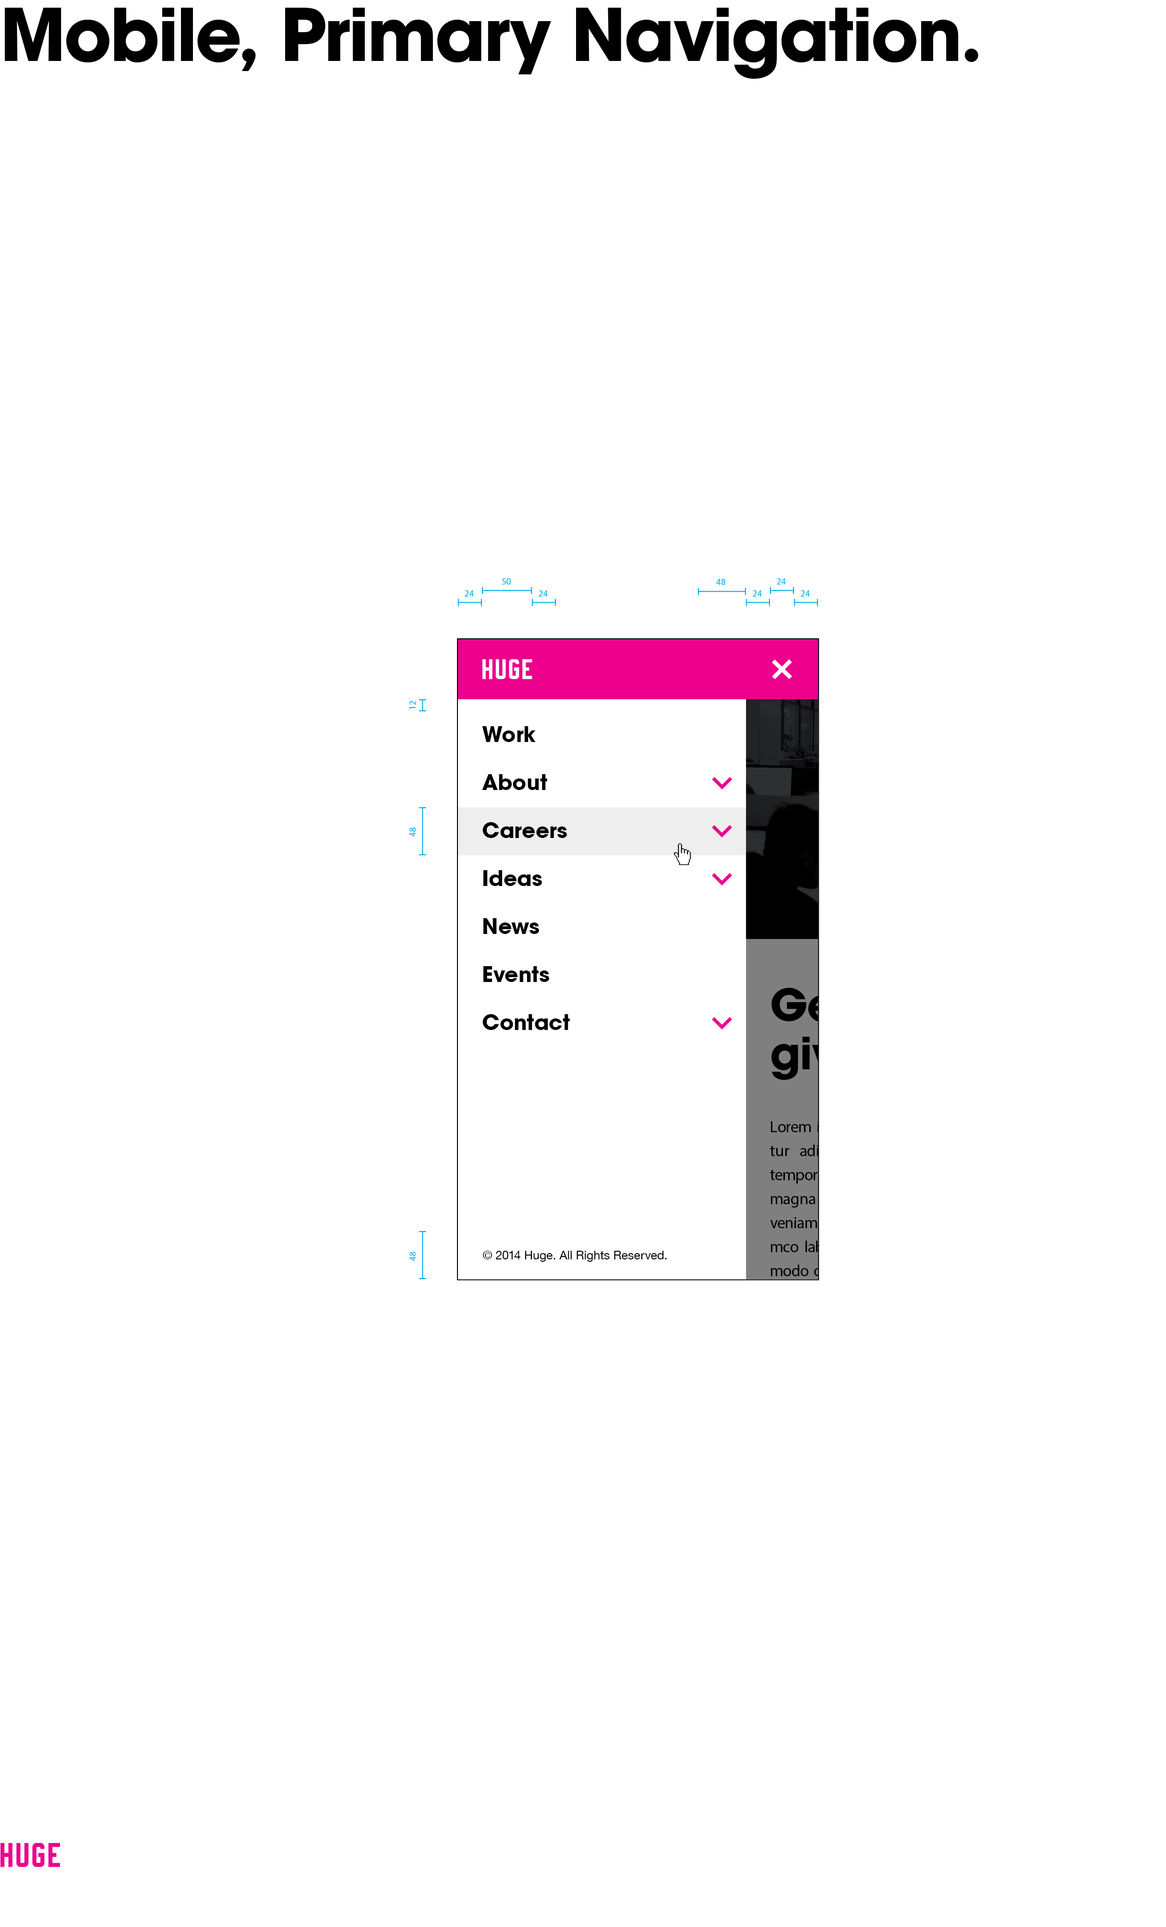
<style>
.page{position:relative;width:1166px;height:1927px;background:#ffffff}
.page>*{position:absolute;margin:0}
.t1{font:72px "HUGE-AvantGarde-Bold";letter-spacing:-0.026em;color:#000000}
.t2{font:72px "HUGE-AvantGarde-Bold";letter-spacing:-0.029em;color:#000000}
.t3{font:72px "HUGE-AvantGarde-Bold";letter-spacing:-0.059em;color:#000000}
.t4{font:72px "HUGE-AvantGarde-Bold";letter-spacing:-0.014em;color:#000000}
.t5{font:72px "HUGE-AvantGarde-Bold";letter-spacing:-0.033em;color:#000000}
.t6{font:72px "HUGE-AvantGarde-Bold";letter-spacing:-0.024em;color:#000000}
.t7{font:72px "HUGE-AvantGarde-Bold";letter-spacing:-0.027em;color:#000000}
.t8{font:72px "HUGE-AvantGarde-Bold";letter-spacing:0.001em;color:#000000}
.t9{font:72px "HUGE-AvantGarde-Bold";letter-spacing:-0.025em;color:#000000}
.t10{font:72px "HUGE-AvantGarde-Bold";letter-spacing:-0.037em;color:#000000}
.t11{font:72px "HUGE-AvantGarde-Bold";letter-spacing:-0.036em;color:#000000}
.t12{font:72px "HUGE-AvantGarde-Bold";letter-spacing:-0.021em;color:#000000}
.t13{font:72px "HUGE-AvantGarde-Bold";letter-spacing:-0.019em;color:#000000}
.t14{font:72px "HUGE-AvantGarde-Bold";color:#000000}
.t15{font:9px "GalaxieCopernicus-Book";letter-spacing:0.003em;color:#00adef}
.t16{font:9px "GalaxieCopernicus-Book";color:#00adef}
.t17{font:9px "GalaxieCopernicus-Book";letter-spacing:0.013em;color:#00adef}
.t18{font:9px "GalaxieCopernicus-Book";letter-spacing:0.031em;color:#00adef}
.t19{font:21px "HUGE-AvantGarde-Bold";color:#000000}
.t20{font:21px "HUGE-AvantGarde-Bold";letter-spacing:-0.037em;color:#000000}
.t21{font:21px "HUGE-AvantGarde-Bold";letter-spacing:-0.002em;color:#000000}
.t22{font:21px "HUGE-AvantGarde-Bold";letter-spacing:-0.001em;color:#000000}
.t23{font:21px "HUGE-AvantGarde-Bold";letter-spacing:0.007em;color:#000000}
.t24{font:21px "HUGE-AvantGarde-Bold";letter-spacing:0.002em;color:#000000}
.t25{font:21px "HUGE-AvantGarde-Bold";letter-spacing:0.001em;color:#000000}
.t26{font:21px "HUGE-AvantGarde-Bold";letter-spacing:0.012em;color:#000000}
.t27{font:21px "HUGE-AvantGarde-Bold";letter-spacing:0.004em;color:#000000}
.t28{font:21px "HUGE-AvantGarde-Bold";letter-spacing:0.003em;color:#000000}
.t29{font:21px "HUGE-AvantGarde-Bold";letter-spacing:-0.018em;color:#000000}
.t30{font:21px "HUGE-AvantGarde-Bold";letter-spacing:-0.005em;color:#000000}
.t31{font:21px "HUGE-AvantGarde-Bold";letter-spacing:-0.011em;color:#000000}
.t32{font:21px "HUGE-AvantGarde-Bold";letter-spacing:-0.029em;color:#000000}
.t33{font:21px "HUGE-AvantGarde-Bold";letter-spacing:0.01em;color:#000000}
.t34{font:21px "HUGE-AvantGarde-Bold";letter-spacing:-0.004em;color:#000000}
.t35{font:12px "HelveticaNeue";letter-spacing:-0.001em;color:#000000}
.t36{font:12px "HelveticaNeue";color:#000000}
.t37{font:12px "HelveticaNeue";letter-spacing:-0.016em;color:#000000}
.t38{font:12px "HelveticaNeue";letter-spacing:-0.03em;color:#000000}
.t39{font:12px "HelveticaNeue";letter-spacing:-0.076em;color:#000000}
.t40{font:12px "HelveticaNeue";letter-spacing:-0.003em;color:#000000}
.t41{font:12px "HelveticaNeue";letter-spacing:-0.009em;color:#000000}
.t42{font:12px "HelveticaNeue";letter-spacing:0.006em;color:#000000}
.t43{font:12px "HelveticaNeue";letter-spacing:-0.006em;color:#000000}
.t44{font:12px "HelveticaNeue";letter-spacing:0.028em;color:#000000}
.t45{font:12px "HelveticaNeue";letter-spacing:-0.021em;color:#000000}
.t46{font:12px "HelveticaNeue";letter-spacing:-0.012em;color:#000000}
</style>
<div class="page">
<p class="t1" style="left:5px;top:8px;width:973px;height:71px">M<span class="t2">o</span>bil<span class="t3">e</span><span class="t4">, </span><span class="t5">P</span><span class="t6">r</span>i<span class="t7">m</span>a<span class="t8">r</span><span class="t4">y </span><span class="t9">N</span><span class="t10">a</span><span class="t11">v</span><span class="t9">i</span>g<span class="t12">a</span><span class="t13">t</span><span class="t7">i</span><span class="t2">o</span><span class="t5">n</span><span class="t14">.</span></p>
<p class="t15" style="left:502px;top:578px;width:9px;height:7px">5<span class="t16">0</span></p>
<p class="t17" style="left:716px;top:579px;width:9px;height:6px">4<span class="t16">8</span></p>
<p class="t17" style="left:777px;top:578px;width:9px;height:7px">2<span class="t16">4</span></p>
<p class="t17" style="left:465px;top:590px;width:9px;height:7px">2<span class="t16">4</span></p>
<p class="t17" style="left:539px;top:590px;width:9px;height:7px">2<span class="t16">4</span></p>
<p class="t17" style="left:753px;top:590px;width:9px;height:7px">2<span class="t16">4</span></p>
<p class="t17" style="left:801px;top:590px;width:9px;height:7px">2<span class="t16">4</span></p>
<p class="t18" style="left:409px;top:701px;width:7px;height:8px">1<span class="t16">2</span></p>
<p class="t19" style="left:482px;top:726px;width:54px;height:16px"><span class="t20">W</span>ork</p>
<p class="t21" style="left:482px;top:774px;width:65px;height:16px">Ab<span class="t22">o</span><span class="t23">u</span><span class="t19">t</span></p>
<p class="t17" style="left:409px;top:828px;width:7px;height:9px">4<span class="t16">8</span></p>
<p class="t19" style="left:482px;top:822px;width:85px;height:16px">C<span class="t24">a</span><span class="t25">r</span>ee<span class="t26">r</span>s</p>
<p class="t27" style="left:483px;top:870px;width:59px;height:16px">I<span class="t25">d</span><span class="t22">e</span><span class="t23">a</span><span class="t19">s</span></p>
<p class="t28" style="left:483px;top:918px;width:56px;height:16px">N<span class="t29">e</span><span class="t30">w</span><span class="t19">s</span></p>
<p class="t31" style="left:483px;top:966px;width:66px;height:16px">E<span class="t32">v</span><span class="t22">e</span><span class="t19">n</span><span class="t33">t</span><span class="t19">s</span></p>
<p class="t19" style="left:482px;top:1014px;width:88px;height:16px">Con<span class="t34">t</span><span class="t22">a</span><span class="t21">c</span>t</p>
<p class="t17" style="left:409px;top:1252px;width:7px;height:9px">4<span class="t16">8</span></p>
<p class="t35" style="left:483px;top:1251px;width:184px;height:11px"><span class="t36">© </span><span class="t37">2</span><span class="t38">0</span><span class="t39">1</span><span class="t36">4 </span><span class="t40">H</span><span class="t36">ug</span><span class="t41">e</span><span class="t36">. </span><span class="t42">A</span><span class="t43">l</span><span class="t36">l </span>Rig<span class="t43">h</span>t<span class="t36">s </span><span class="t40">R</span><span class="t42">e</span><span class="t36">s</span><span class="t42">e</span><span class="t44">r</span><span class="t45">v</span><span class="t42">e</span><span class="t46">d</span><span class="t36">.</span></p>
</div>
